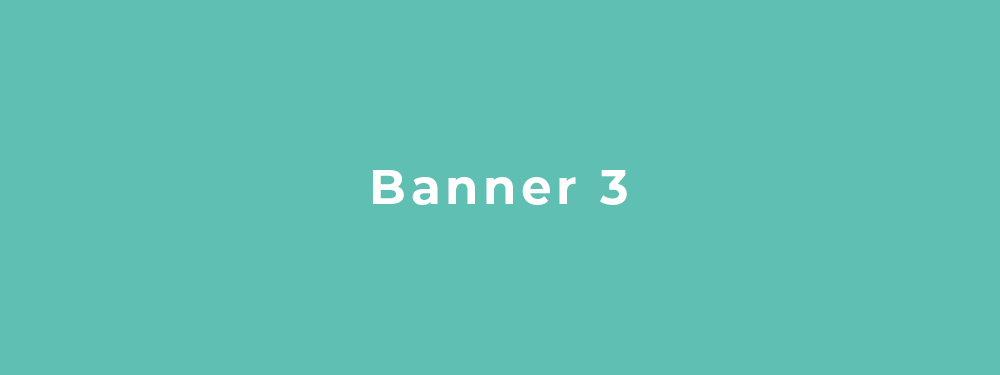
<style>
.page{position:relative;width:1000px;height:375px;background:#5ebfb2}
.page>*{position:absolute;margin:0}
.t1{font:48px "Montserrat-Bold";letter-spacing:0.1em;color:#ffffff}
</style>
<div class="page">
<p class="t1" style="left:373px;top:170px;width:254px;height:35px">Banner 3</p>
</div>
